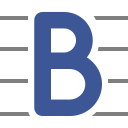
<style>
.page{position:relative;width:128px;height:128px;background:#ffffff}
.page>*{position:absolute;margin:0}
.t1{font:148px "Quicksand-Bold";color:#3d5695}
</style>
<div class="page">
<p class="t1" style="left:34px;top:11px;width:68px;height:106px">B</p>
</div>
